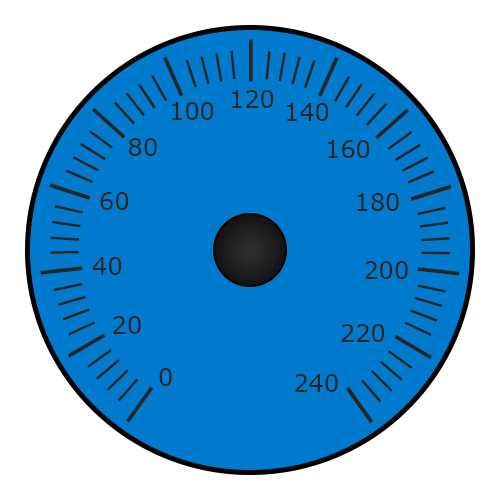
<style>
.page{position:relative;width:500px;height:500px;background:#007acc}
.page>*{position:absolute;margin:0}
.t1{font:30px "Verdana";color:#262626}
.t2{font:44px "Verdana";color:#262626}
.t3{font:24px "Verdana";color:#262626}
</style>
<div class="page">
<p class="t1" style="left:40px;top:39px;width:420px;height:385px;rotate:-20deg"><span class="t2">|</span>||||<span class="t2">|</span>||||<span class="t2">|</span>||||<span class="t2">|</span>||||<span class="t2">|</span>||||<span class="t2">|</span>||||<span class="t2">|</span>||||<span class="t2">|</span>||||<span class="t2">|</span>||||<span class="t2">|</span>||||<span class="t2">|</span>||||<span class="t2">|</span>||||<span class="t2">|</span></p>
<p class="t3" style="left:172px;top:102px;width:42px;height:18px">100</p>
<p class="t3" style="left:232px;top:90px;width:42px;height:18px">120</p>
<p class="t3" style="left:287px;top:103px;width:42px;height:18px">140</p>
<p class="t3" style="left:128px;top:138px;width:29px;height:18px">80</p>
<p class="t3" style="left:328px;top:140px;width:42px;height:18px">160</p>
<p class="t3" style="left:100px;top:192px;width:29px;height:18px">60</p>
<p class="t3" style="left:357px;top:193px;width:42px;height:18px">180</p>
<p class="t3" style="left:92px;top:257px;width:30px;height:18px">40</p>
<p class="t3" style="left:365px;top:261px;width:43px;height:18px">200</p>
<p class="t3" style="left:113px;top:316px;width:28px;height:18px">20</p>
<p class="t3" style="left:341px;top:324px;width:44px;height:18px">220</p>
<p class="t3" style="left:159px;top:368px;width:13px;height:18px">0</p>
<p class="t3" style="left:295px;top:374px;width:43px;height:18px">240</p>
</div>
